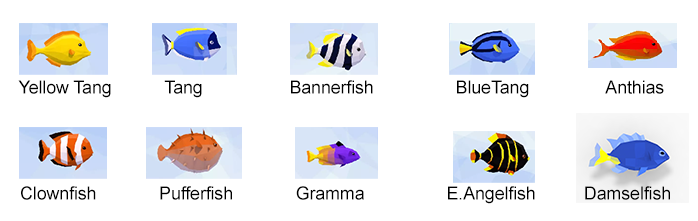
<style>
.page{position:relative;width:698px;height:221px;background:#ffffff}
.page>*{position:absolute;margin:0}
.t1{font:18px "ArialMT";letter-spacing:-0.01em;color:#000000}
</style>
<div class="page">
<p class="t1" style="left:18px;top:80px;width:646px;height:18px">Yellow Tang           Tang                  Bannerfish                 BlueTang                Anthias</p>
<p class="t1" style="left:21px;top:186px;width:649px;height:18px">Clownfish             Pufferfish             Gramma                 E.Angelfish          Damselfish</p>
</div>
